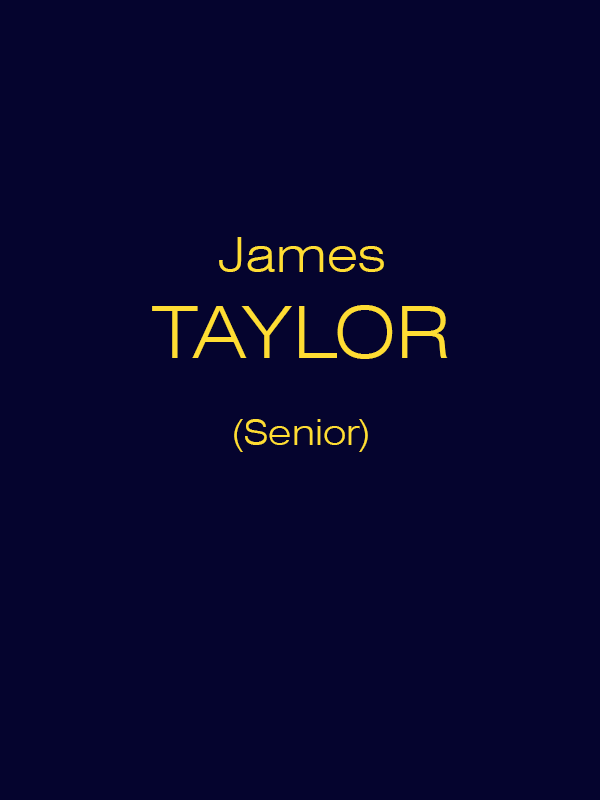
<style>
.page{position:relative;width:600px;height:800px;background:#05042e}
.page>*{position:absolute;margin:0}
.t1{font:36px "Swiss721BT-LightExtended";color:#ffdd33}
.t2{font:48px "Swiss721BT-LightExtended";color:#ffdd33}
.t3{font:72px "Swiss721BT-LightExtended";color:#ffdd33}
</style>
<div class="page">
<p class="t1" style="left:152px;top:237px;width:296px;height:215px;text-align:center"><span class="t2">James<br></span><span class="t3">TAYLOR<br></span><br>(Senior)</p>
</div>
